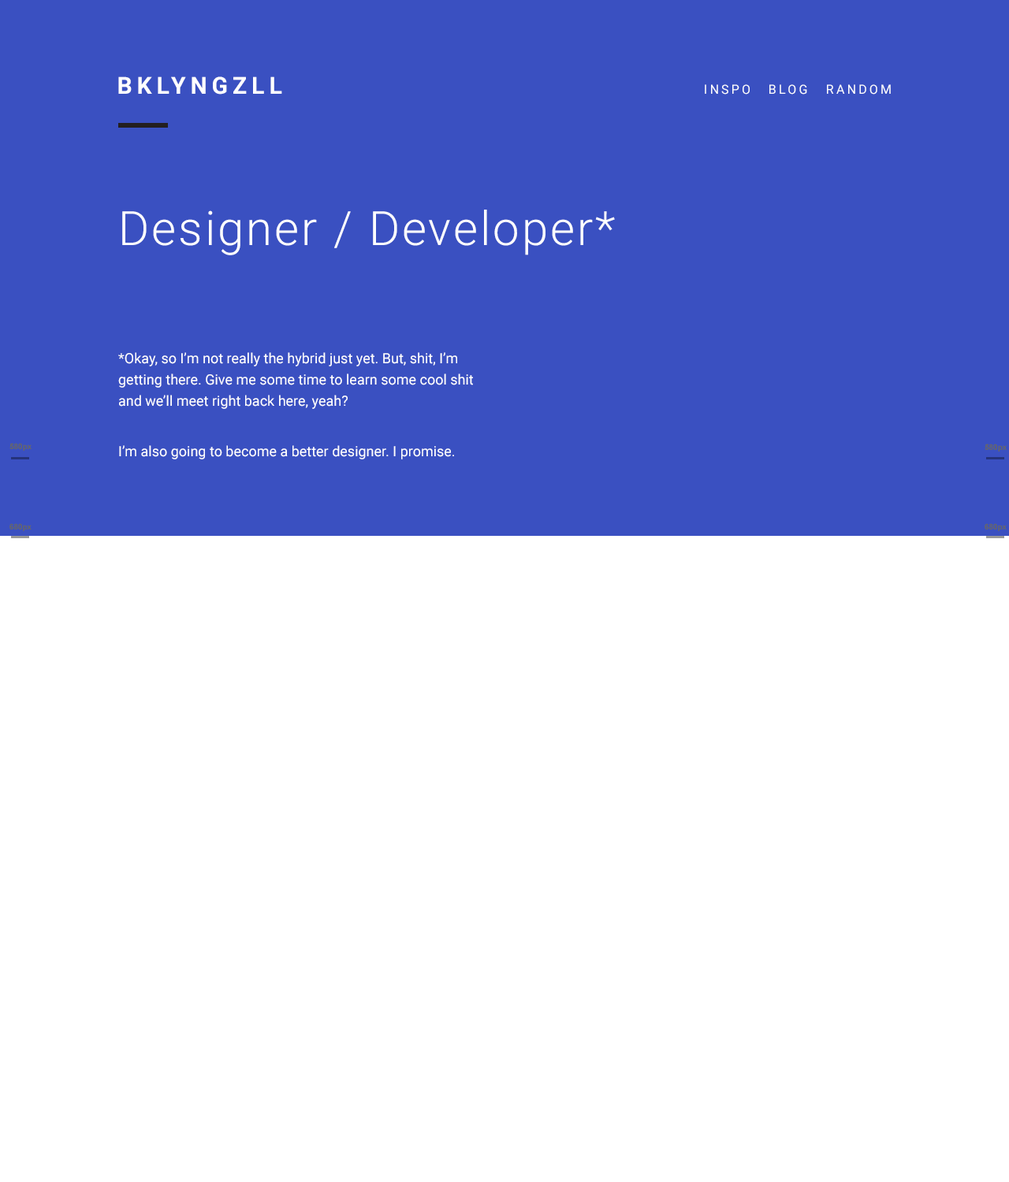
<style>
.page{position:relative;width:1009px;height:1182px;background:#ffffff}
.page>*{position:absolute;margin:0}
.t1{font:23.6px "Roboto-Bold";letter-spacing:0.2em;color:#ffffff}
.t2{font:12.6px "Roboto-Regular";letter-spacing:0.2em;color:#ffffff}
.t3{font:47.3px "Roboto-Light";letter-spacing:0.05em;color:#ffffff}
.t4{font:14.2px/21.3px "Roboto-Regular";color:#ffffff}
.t5{font:7.9px "Arial-BoldMT";color:#666666}
.t6{font:7.9px "Arial-BoldMT";letter-spacing:-0.01em;color:#666666}
</style>
<div class="page">
<p class="t1" style="left:118px;top:76px;width:164px;height:19px">BKLYNGZLL</p>
<p class="t2" style="left:705px;top:84px;width:44px;height:11px">INSPO</p>
<p class="t2" style="left:769px;top:84px;width:38px;height:11px">BLOG</p>
<p class="t2" style="left:827px;top:84px;width:64px;height:11px">RANDOM</p>
<p class="t3" style="left:122px;top:210px;width:493px;height:45px">Designer / Developer*</p>
<p class="t4" style="left:118px;top:352px;width:355px;height:107px">*Okay, so I’m not really the hybrid just yet. But, shit, I’m getting there. Give me some time to learn some cool shit and we’ll meet right back here, yeah?<br><br>I’m also going to become a better designer. I promise.</p>
<p class="t5" style="left:9px;top:443px;width:23px;height:8px">580px</p>
<p class="t5" style="left:984px;top:444px;width:22px;height:8px">580px</p>
<p class="t6" style="left:9px;top:523px;width:23px;height:8px">680px</p>
<p class="t6" style="left:984px;top:523px;width:22px;height:8px">680px</p>
</div>
